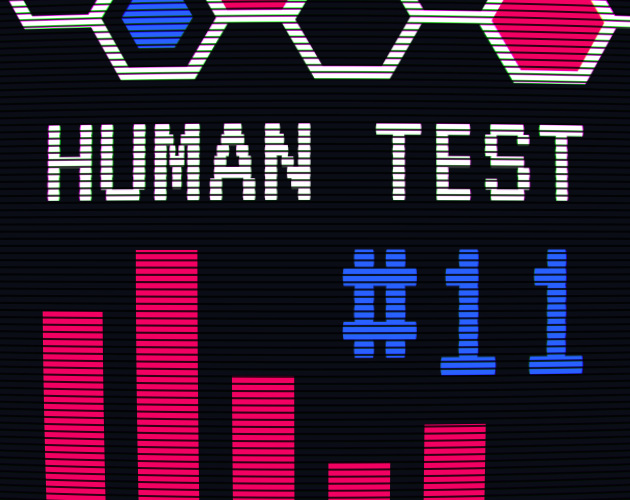
<style>
.page{position:relative;width:630px;height:500px;background:#0b0d16}
.page>*{position:absolute;margin:0}
.t1{font:133.3px "VT323-Regular"}
.t2{font:216.7px "VT323-Regular"}
</style>
<div class="page">
<p class="t1" style="left:53px;top:128px;width:525px;height:74px">HUMAN TEST</p>
<p class="t2" style="left:341px;top:249px;width:237px;height:122px">#11</p>
</div>
